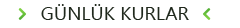
<style>
.page{position:relative;width:240px;height:28px;background:#ffffff}
.page>*{position:absolute;margin:0}
.t1{font:19.2px "Ebrima";color:#1f281c}
</style>
<div class="page">
<p class="t1" style="left:41px;top:4px;width:148px;height:16px">GÜNLÜK KURLAR</p>
</div>
